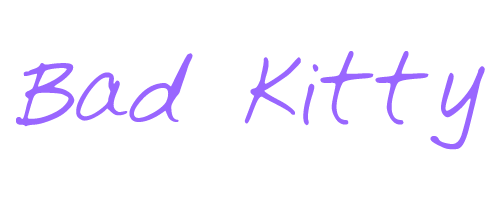
<style>
.page{position:relative;width:500px;height:200px;background:#ffffff}
.page>*{position:absolute;margin:0}
.t1{font:120px "SimpleWriting";color:#9966ff}
</style>
<div class="page">
<p class="t1" style="left:16px;top:51px;width:469px;height:99px">Bad Kitty</p>
</div>
